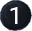
<style>
.page{position:relative;width:32px;height:31px}
.page>*{position:absolute;margin:0}
.t1{font:23.4px "Roboto-Regular";color:#ffffff}
</style>
<div class="page">
<p class="t1" style="left:10px;top:7px;width:8px;height:17px">1</p>
</div>
